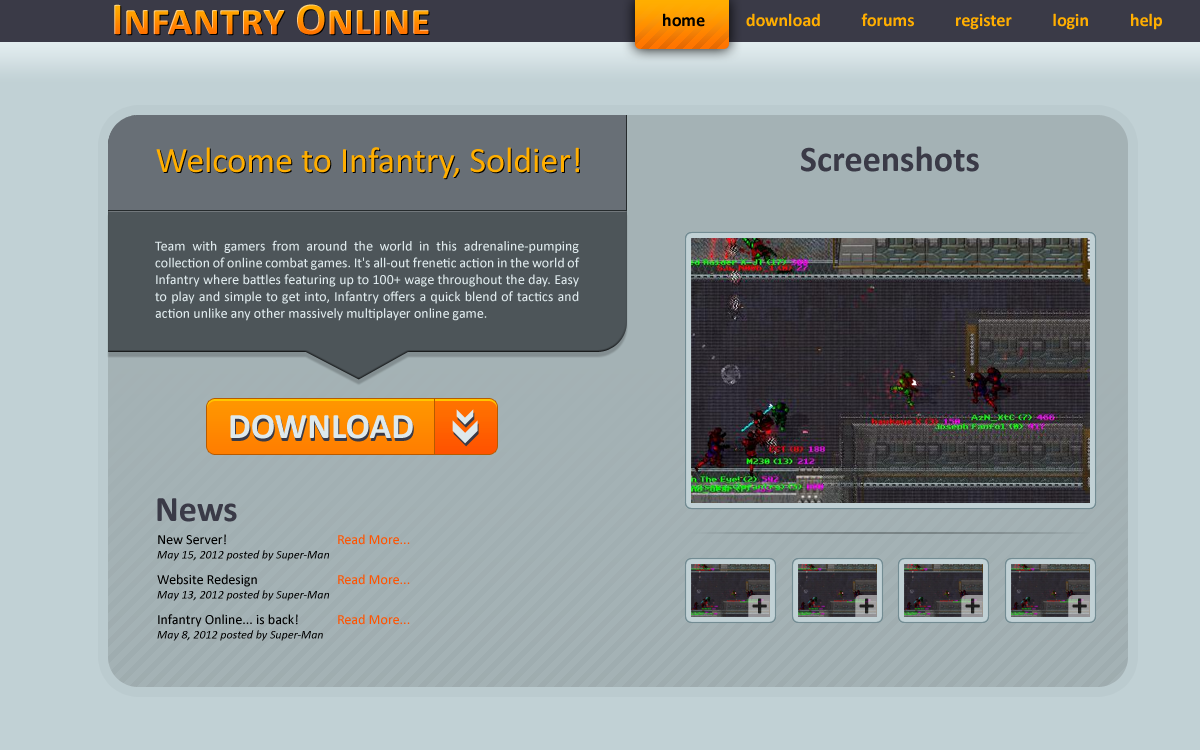
<style>
.page{position:relative;width:1200px;height:750px;background:#c1d1d5}
.page>*{position:absolute;margin:0}
.t1{font:46px "Calibri-Bold";font-variant:small-caps}
.t2{font:18px "Calibri-Bold";color:#ffae00}
.t3{font:18px "Calibri-Bold";color:#000000}
.t4{font:36px "Calibri";color:#ffae00}
.t5{font:36px "Calibri-Bold";color:#3a3a47}
.t6{font:14px "Calibri";color:#dee9ec}
.t7{font:36px "Calibri-Bold";color:#dee9ec}
.t8{font:12px "Calibri-Italic";color:#000000}
.t9{font:14px "Calibri";color:#000000}
.t10{font:14px "Calibri";color:#ff5300}
</style>
<div class="page">
<p class="t1" style="left:114px;top:4px;width:315px;height:31px">Infantry Online</p>
<p class="t2" style="left:663px;top:13px;width:499px;height:17px"><span class="t3">home</span>          download          forums          register          login          help</p>
<p class="t4" style="left:156px;top:147px;width:423px;height:32px">Welcome to Infantry, Soldier!</p>
<p class="t5" style="left:801px;top:146px;width:178px;height:26px">Screenshots</p>
<p class="t6" style="left:155px;top:240px;width:425px;height:81px;text-align:justify">Team with gamers from around the world in this adrenaline-pumping collection of online combat games. It's all-out frenetic action in the world of Infantry where battles featuring up to 100+ wage throughout the day. Easy to play and simple to get into, Infantry offers a quick blend of tactics and action unlike any other massively multiplayer online game.</p>
<p class="t7" style="left:230px;top:414px;width:183px;height:25px">DOWNLOAD</p>
<p class="t5" style="left:157px;top:498px;width:80px;height:24px">News</p>
<p class="t8" style="left:157px;top:534px;width:253px;height:27px"><span class="t9">New Server!    </span><span class="t10">Read More...<br></span>May 15, 2012 posted by Super-Man</p>
<p class="t8" style="left:157px;top:574px;width:253px;height:27px"><span class="t9">Website Redesign   </span><span class="t10">Read More...<br></span>May 13, 2012 posted by Super-Man</p>
<p class="t8" style="left:157px;top:614px;width:253px;height:27px"><span class="t9">Infantry Online... is back!  </span><span class="t10">Read More...<br></span>May 8, 2012 posted by Super-Man</p>
</div>
